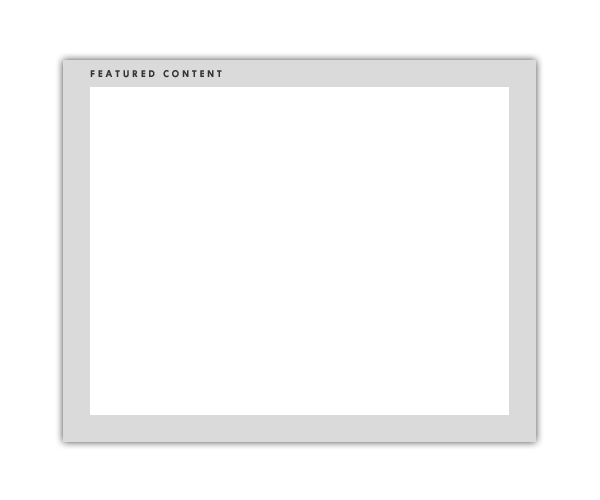
<style>
.page{position:relative;width:600px;height:500px;background:#ffffff}
.page>*{position:absolute;margin:0}
.t1{font:10.6px "TwCenMT-Bold";letter-spacing:0.24em;color:#333333;text-transform:uppercase}
</style>
<div class="page">
<p class="t1" style="left:90px;top:70px;width:132px;height:8px">featured content</p>
</div>
